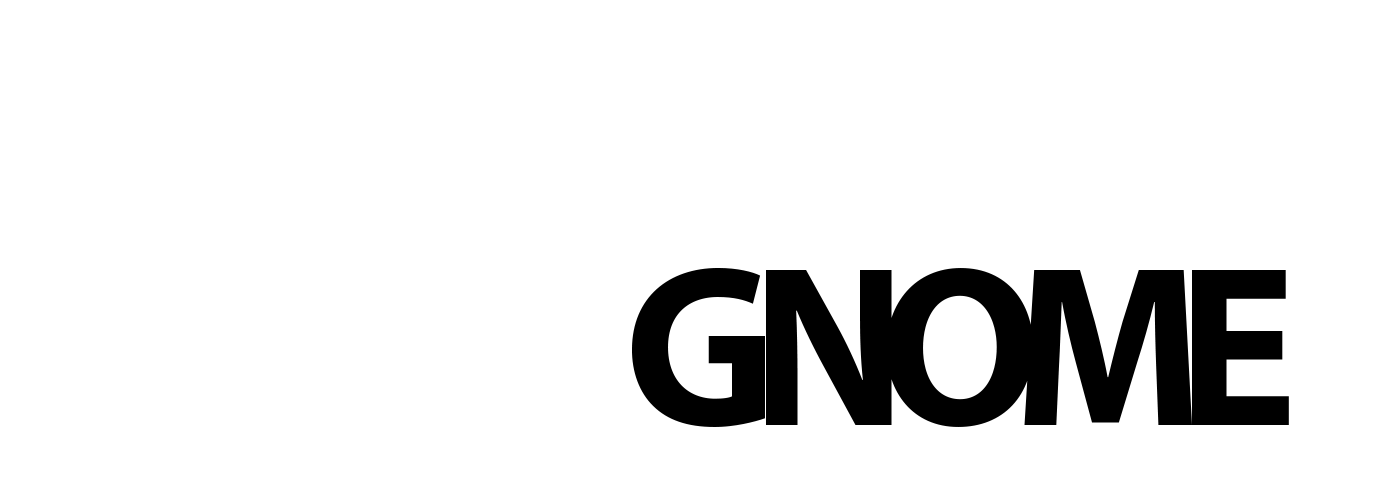
<style>
.page{position:relative;width:1400px;height:488px;background:#ffffff}
.page>*{position:absolute;margin:0}
.t1{font:230px/200px "MyriadPro-Bold";letter-spacing:-0.12em;color:#000000}
.t2{font:230px/200px "MyriadPro-Bold";color:#ffffff;scale:1.15 1}
</style>
<div class="page">
<p class="t1" style="left:628px;top:68px;width:661px;height:359px;text-align:center"><span class="t2">AUTO<br></span>GNOME</p>
</div>
